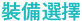
<style>
.page{position:relative;width:82px;height:21px;background:#ffffff}
.page>*{position:absolute;margin:0}
.t1{font:20px "GothicMB101Pr6N-Medium";color:#1cbabd}
</style>
<div class="page">
<p class="t1" style="left:1px;top:2px;width:80px;height:19px">裝備選擇</p>
</div>
